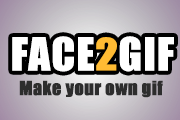
<style>
.page{position:relative;width:180px;height:120px}
.page>*{position:absolute;margin:0}
.t1{font:41.9px "Impact";color:#ffffff;font-weight:bold;scale:1.03 1}
.t2{font:41.9px "Impact";color:#000000;font-weight:bold;scale:1.03 1}
.t3{font:41px "Impact";color:#ffbb33;font-weight:bold;scale:1.1 1}
.t4{font:17.9px "Impact";color:#2d2d2d;font-weight:bold}
</style>
<div class="page">
<p class="t1" style="left:12px;top:36px;width:162px;height:36px">FACE<span class="t2">2</span>GIF</p>
<p class="t3" style="left:96px;top:37px;width:21px;height:34px">2</p>
<p class="t4" style="left:19px;top:80px;width:144px;height:18px">Make your own gif</p>
</div>
